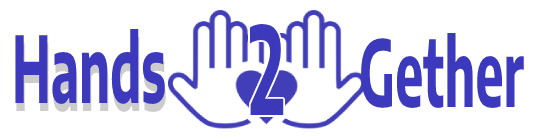
<style>
.page{position:relative;width:540px;height:140px;background:#ffffff}
.page>*{position:absolute;margin:0}
.t1{font:91.7px "EncodeSans-Bold";color:#3c39bd;scale:0.55 1}
.t2{font:121.3px "EncodeSans-Bold";color:#3c39bd;scale:0.55 1}
</style>
<div class="page">
<p class="t1" style="left:15px;top:29px;width:150px;height:75px">Hands</p>
<p class="t2" style="left:249px;top:24px;width:35px;height:91px">2</p>
<p class="t1" style="left:361px;top:33px;width:163px;height:75px">Gether</p>
</div>
